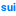
<style>
.page{position:relative;width:16px;height:16px;background:#ffffff}
.page>*{position:absolute;margin:0}
.t1{font:11px "Roboto-ExtraBold";color:#007aff}
</style>
<div class="page">
<p class="t1" style="left:1px;top:2px;width:15px;height:10px">sui</p>
</div>
